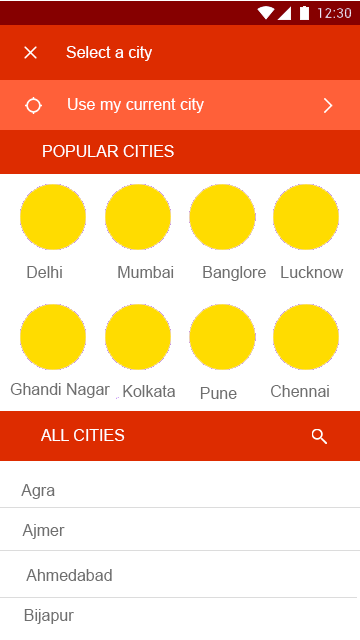
<style>
.page{position:relative;width:360px;height:640px;background:#ffffff}
.page>*{position:absolute;margin:0}
.t1{font:16px "ArialMT";color:#ffffff}
.t2{font:16px "ArialMT";color:#6f6f6f}
</style>
<div class="page">
<p class="t1" style="left:66px;top:46px;width:86px;height:15px">Select a city</p>
<p class="t1" style="left:68px;top:98px;width:136px;height:15px">Use my current city</p>
<p class="t1" style="left:43px;top:145px;width:131px;height:12px">POPULAR CITIES</p>
<p class="t2" style="left:27px;top:266px;width:35px;height:12px">Delhi</p>
<p class="t2" style="left:118px;top:266px;width:56px;height:12px">Mumbai</p>
<p class="t2" style="left:203px;top:266px;width:63px;height:15px">Banglore</p>
<p class="t2" style="left:281px;top:266px;width:63px;height:12px">Lucknow</p>
<p class="t2" style="left:10px;top:383px;width:100px;height:15px">Ghandi Nagar</p>
<p class="t2" style="left:123px;top:385px;width:52px;height:12px">Kolkata</p>
<p class="t2" style="left:200px;top:387px;width:37px;height:12px">Pune</p>
<p class="t2" style="left:271px;top:385px;width:58px;height:12px">Chennai</p>
<p class="t1" style="left:41px;top:429px;width:84px;height:12px">ALL CITIES</p>
<p class="t2" style="left:21px;top:484px;width:34px;height:15px">Agra</p>
<p class="t2" style="left:22px;top:524px;width:43px;height:15px">Ajmer</p>
<p class="t2" style="left:26px;top:569px;width:86px;height:12px">Ahmedabad</p>
<p class="t2" style="left:24px;top:609px;width:50px;height:15px">Bijapur</p>
</div>
